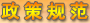
<style>
.page{position:relative;width:90px;height:23px}
.page>*{position:absolute;margin:0}
.t1{font:18.7px "SimHei";letter-spacing:0.2em;font-weight:bold}
</style>
<div class="page">
<p class="t1" style="left:1px;top:2px;width:87px;height:18px">政策规范</p>
</div>
